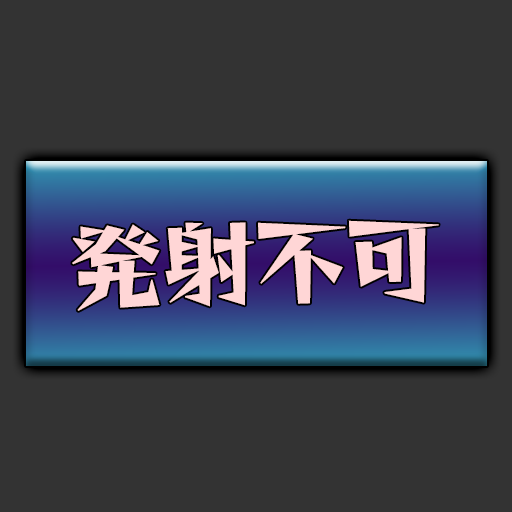
<style>
.page{position:relative;width:512px;height:512px;background:#333333}
.page>*{position:absolute;margin:0}
.t1{font:94.4px "ReggaeOne-Regular";letter-spacing:-0.05em;color:#ffd6d6;font-variant:small-caps}
</style>
<div class="page">
<p class="t1" style="left:72px;top:220px;width:367px;height:91px;rotate:-2deg">発射不可</p>
</div>
